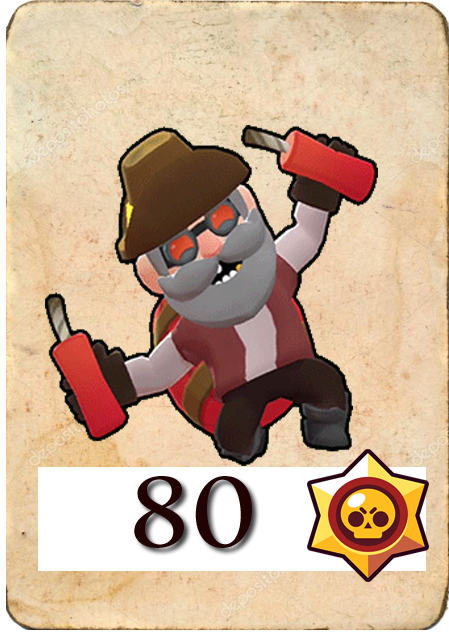
<style>
.page{position:relative;width:449px;height:635px}
.page>*{position:absolute;margin:0}
.t1{font:100px "CharlemagneStd-Bold";color:#210303}
</style>
<div class="page">
<p class="t1" style="left:134px;top:476px;width:118px;height:72px">80</p>
</div>
